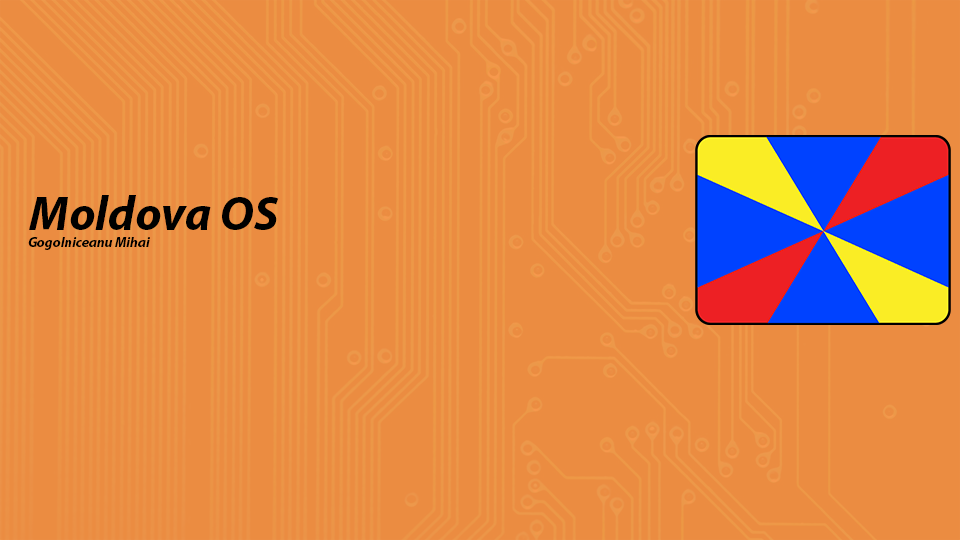
<style>
.page{position:relative;width:960px;height:540px;background:#eb8c41}
.page>*{position:absolute;margin:0}
.t1{font:48px "MyriadPro-BoldIt";color:#000000}
.t2{font:14px "MyriadPro-BoldIt";color:#000000}
</style>
<div class="page">
<p class="t1" style="left:29px;top:195px;width:250px;height:35px">Moldova OS</p>
<p class="t2" style="left:28px;top:237px;width:122px;height:13px">Gogolniceanu Mihai</p>
</div>
